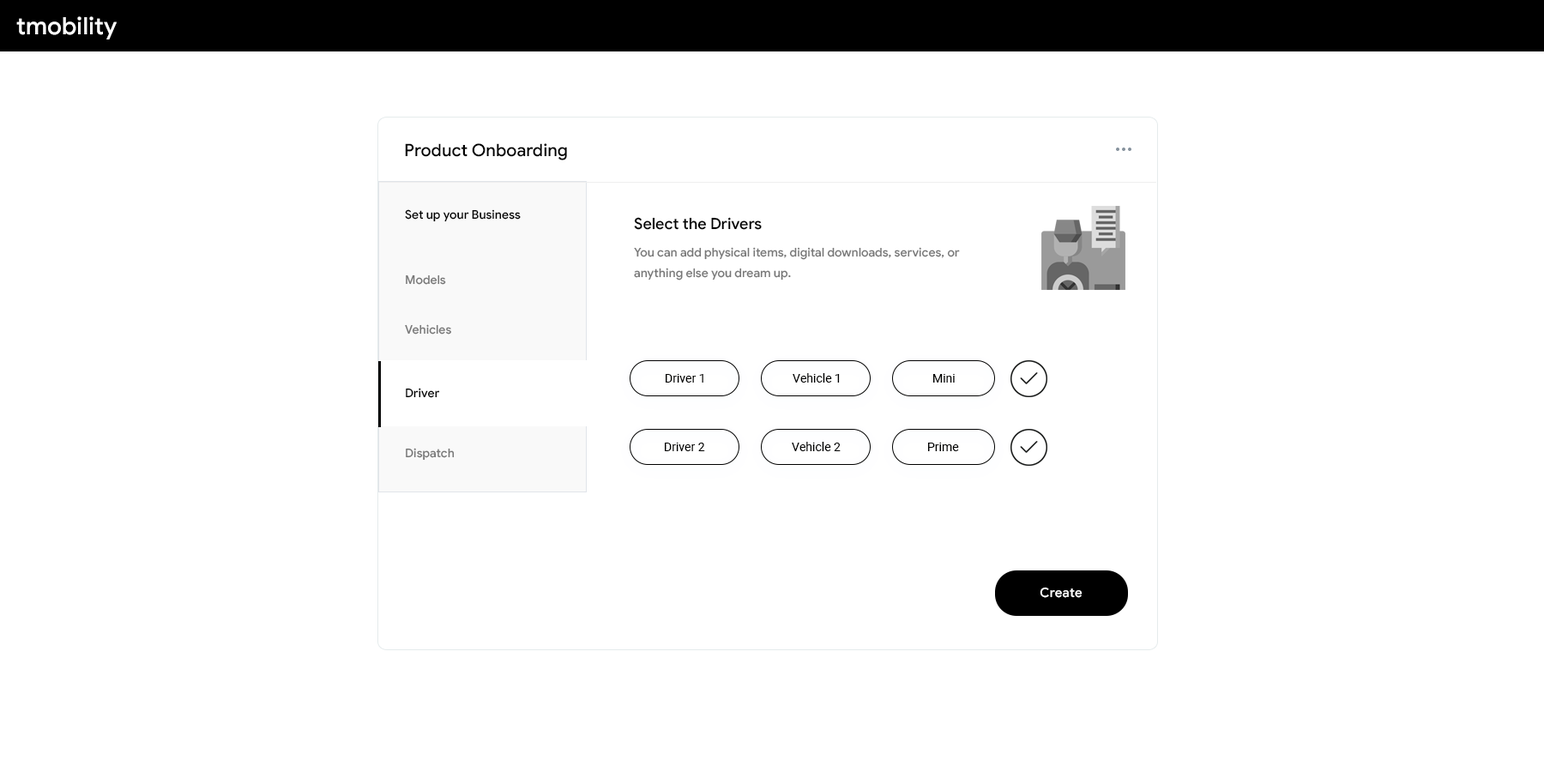
<style>
.page{position:relative;width:1544px;height:772px;background:#ffffff}
.page>*{position:absolute;margin:0}
.t1{font:24px "GoogleSans-Medium";color:#ffffff}
.t2{font:17.2px "GoogleSans-Medium";color:#000000}
.t3{font:12px "GoogleSans-Medium";color:#000000}
.t4{font:15.4px "GoogleSans-Medium";color:#000000}
.t5{font:12px/20.6px "GoogleSans-Medium";color:#777777}
.t6{font:12px "GoogleSans-Medium";color:#777777}
.t7{font:12px "Roboto-Regular";color:#000000}
.t8{font:12.9px "GoogleSans-Medium";letter-spacing:0.01em;color:#ffffff}
</style>
<div class="page">
<p class="t1" style="left:16px;top:16px;width:101px;height:23px">tmobility</p>
<p class="t2" style="left:405px;top:143px;width:162px;height:17px">Product Onboarding</p>
<p class="t3" style="left:405px;top:209px;width:116px;height:13px">Set up your Business</p>
<p class="t4" style="left:634px;top:217px;width:128px;height:13px">Select the Drivers</p>
<p class="t5" style="left:634px;top:247px;width:326px;height:34px">You can add physical items, digital downloads, services, or anything else you dream up.</p>
<p class="t6" style="left:406px;top:275px;width:40px;height:10px">Models</p>
<p class="t6" style="left:405px;top:324px;width:46px;height:11px">Vehicles</p>
<p class="t7" style="left:666px;top:374px;width:38px;height:9px">Driver 1</p>
<p class="t7" style="left:793px;top:373px;width:47px;height:10px">Vehicle 1</p>
<p class="t7" style="left:933px;top:374px;width:22px;height:9px">Mini</p>
<p class="t3" style="left:406px;top:388px;width:34px;height:10px">Driver</p>
<p class="t6" style="left:406px;top:448px;width:49px;height:13px">Dispatch</p>
<p class="t7" style="left:665px;top:443px;width:40px;height:8px">Driver 2</p>
<p class="t7" style="left:792px;top:442px;width:49px;height:9px">Vehicle 2</p>
<p class="t7" style="left:928px;top:443px;width:31px;height:8px">Prime</p>
<p class="t8" style="left:1040px;top:587px;width:43px;height:11px">Create</p>
</div>
